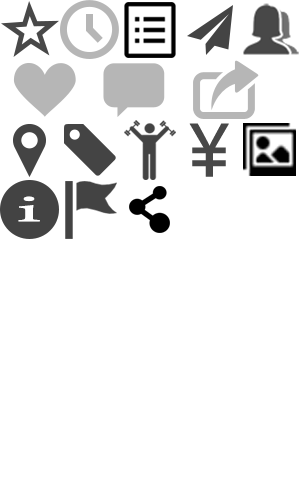
<style>
.page{position:relative;width:300px;height:500px;background:#ffffff}
.page>*{position:absolute;margin:0}
.t1{font:69.8px "MicrosoftYaHei";letter-spacing:0.1em;color:#484848;font-weight:bold}
.t2{font:55.4px "DaunPenh";letter-spacing:0.1em;color:#ffffff;font-weight:bold;scale:2.45 1}
</style>
<div class="page">
<p class="t1" style="left:189px;top:123px;width:40px;height:54px">￥</p>
<p class="t2" style="left:18px;top:196px;width:22px;height:26px">i</p>
</div>
